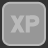
<style>
.page{position:relative;width:48px;height:48px;background:#979797}
.page>*{position:absolute;margin:0}
.t1{font:30px "EarthmanExtHeavyBB";color:#bababa}
</style>
<div class="page">
<p class="t1" style="left:10px;top:15px;width:30px;height:18px">XP</p>
</div>
